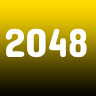
<style>
.page{position:relative;width:96px;height:96px}
.page>*{position:absolute;margin:0}
.t1{font:41.2px "ConcertOne-Regular";color:#ffffff}
</style>
<div class="page">
<p class="t1" style="left:5px;top:28px;width:82px;height:30px">2048</p>
</div>
